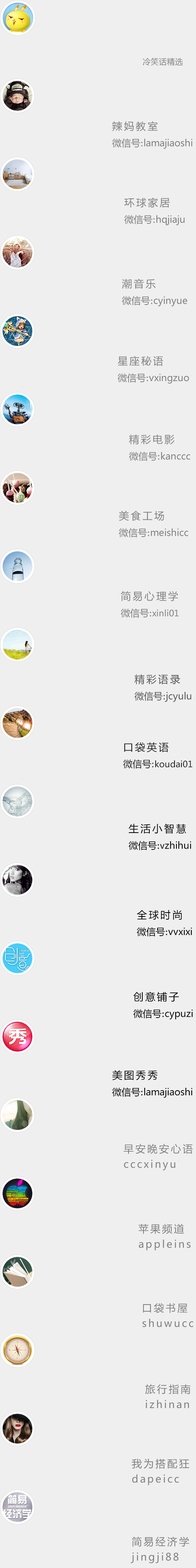
<style>
.page{position:relative;width:196px;height:1568px;background:#efefef}
.page>*{position:absolute;margin:0}
.t1{font:7.8px "MicrosoftYaHei";letter-spacing:0.03em;color:#808080}
.t2{font:9.4px/16.6px "MicrosoftYaHei";color:#808080}
.t3{font:10.2px/15.3px "MicrosoftYaHei";letter-spacing:0.16em;color:#808080}
.t4{font:9.4px/15.3px "MicrosoftYaHei";color:#808080}
.t5{font:9.4px/15.3px "Vani";color:#808080}
.t6{font:8.6px/16.6px "MicrosoftYaHei";color:#808080}
.t7{font:9.4px/16.6px "MicrosoftYaHei";color:#555555}
.t8{font:10.2px/15.3px "MicrosoftYaHei";letter-spacing:0.16em;color:#555555}
.t9{font:9.4px/15.3px "MicrosoftYaHei";color:#555555}
.t10{font:9.4px/15.3px "Vani";color:#555555}
.t11{font:8.6px/16.5px "MicrosoftYaHei";color:#212121}
.t12{font:10.1px/15.2px "MicrosoftYaHei";letter-spacing:0.16em;color:#212121}
.t13{font:9.4px/15.2px "MicrosoftYaHei";color:#212121}
.t14{font:9.4px/15.2px "Vani";color:#212121}
.t15{font:9.4px/16.6px "MicrosoftYaHei";color:#060606}
.t16{font:10.2px/15.3px "MicrosoftYaHei";letter-spacing:0.16em;color:#060606}
.t17{font:9.4px/15.3px "MicrosoftYaHei";color:#060606}
.t18{font:9.4px/15.3px "Vani";color:#060606}
.t19{font:8.6px/16.6px "MicrosoftYaHei";color:#060606}
.t20{font:9.4px/16.6px "MicrosoftYaHei";color:#000000}
.t21{font:10.2px/15.3px "MicrosoftYaHei";letter-spacing:0.16em;color:#000000}
.t22{font:9.4px/15.3px "MicrosoftYaHei";color:#000000}
.t23{font:9.4px/15.3px "Vani";color:#000000}
</style>
<div class="page">
<p class="t1" style="left:143px;top:58px;width:40px;height:8px">冷笑话精选</p>
<p class="t2" style="left:112px;top:121px;width:80px;height:28px"><span class="t3">辣妈教室<br></span><span class="t4">微信号</span><span class="t5">:</span>lamajiaoshi</p>
<p class="t2" style="left:124px;top:198px;width:61px;height:27px"><span class="t3">环球家居<br></span><span class="t4">微信号</span><span class="t5">:</span>hqjiaju</p>
<p class="t2" style="left:122px;top:279px;width:65px;height:28px"><span class="t3">潮音乐<br></span><span class="t4">微信号</span><span class="t5">:</span>cyinyue</p>
<p class="t2" style="left:118px;top:356px;width:71px;height:28px"><span class="t3">星座秘语<br></span><span class="t4">微信号</span><span class="t5">:</span>vxingzuo</p>
<p class="t2" style="left:129px;top:434px;width:61px;height:27px"><span class="t3">精彩电影 <br></span><span class="t4">微信号</span><span class="t5">:</span>kanccc</p>
<p class="t2" style="left:119px;top:511px;width:69px;height:26px"><span class="t3">美食工场<br></span><span class="t4">微信号</span><span class="t5">:</span>meishicc</p>
<p class="t6" style="left:121px;top:591px;width:58px;height:27px"><span class="t3">简易心理学<br></span><span class="t4">微信号</span><span class="t5">:</span>xinli01</p>
<p class="t7" style="left:134px;top:674px;width:57px;height:28px"><span class="t8">精彩语录<br></span><span class="t9">微信号</span><span class="t10">:</span>jcyulu</p>
<p class="t11" style="left:123px;top:742px;width:69px;height:27px"><span class="t12">口袋英语<br></span><span class="t13">微信号</span><span class="t14">:</span>koudai01</p>
<p class="t15" style="left:129px;top:824px;width:62px;height:26px"><span class="t16">生活小智慧<br></span><span class="t17">微信号</span><span class="t18">:</span><span class="t19">v</span>zhihui</p>
<p class="t20" style="left:137px;top:910px;width:55px;height:26px"><span class="t21">全球时尚<br></span><span class="t22">微信号</span><span class="t23">:</span>vvxixi</p>
<p class="t20" style="left:133px;top:992px;width:60px;height:28px"><span class="t21">创意铺子<br></span><span class="t22">微信号</span><span class="t23">:</span>cypuzi</p>
<p class="t20" style="left:112px;top:1070px;width:80px;height:28px"><span class="t21">美图秀秀<br></span><span class="t22">微信号</span><span class="t23">:</span>lamajiaoshi</p>
<p class="t3" style="left:123px;top:1144px;width:70px;height:27px">早安晚安心语<br>cccxinyu</p>
<p class="t3" style="left:138px;top:1224px;width:53px;height:26px">苹果频道<br>appleins</p>
<p class="t3" style="left:142px;top:1303px;width:51px;height:24px">口袋书屋<br>shuwucc</p>
<p class="t3" style="left:145px;top:1384px;width:46px;height:24px">旅行指南<br>izhinan</p>
<p class="t3" style="left:132px;top:1459px;width:57px;height:26px">我为搭配狂<br>dapeicc</p>
<p class="t3" style="left:131px;top:1537px;width:58px;height:26px">简易经济学<br>jingji88</p>
</div>
